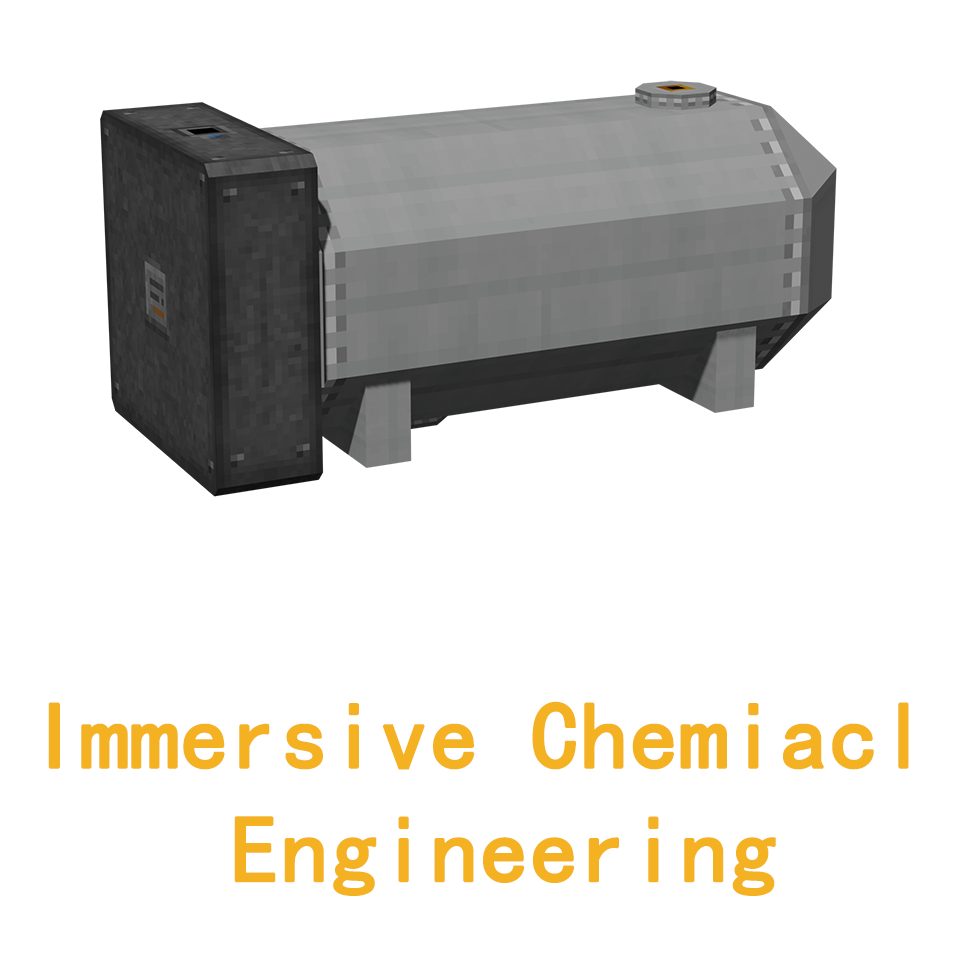
<style>
.page{position:relative;width:960px;height:960px;background:#ffffff}
.page>*{position:absolute;margin:0}
.t1{font:94.8px "SimHei";color:#f4b121;font-weight:bold}
</style>
<div class="page">
<p class="t1" style="left:48px;top:701px;width:861px;height:195px">Immersive Chemiacl<br>    Engineering</p>
</div>
